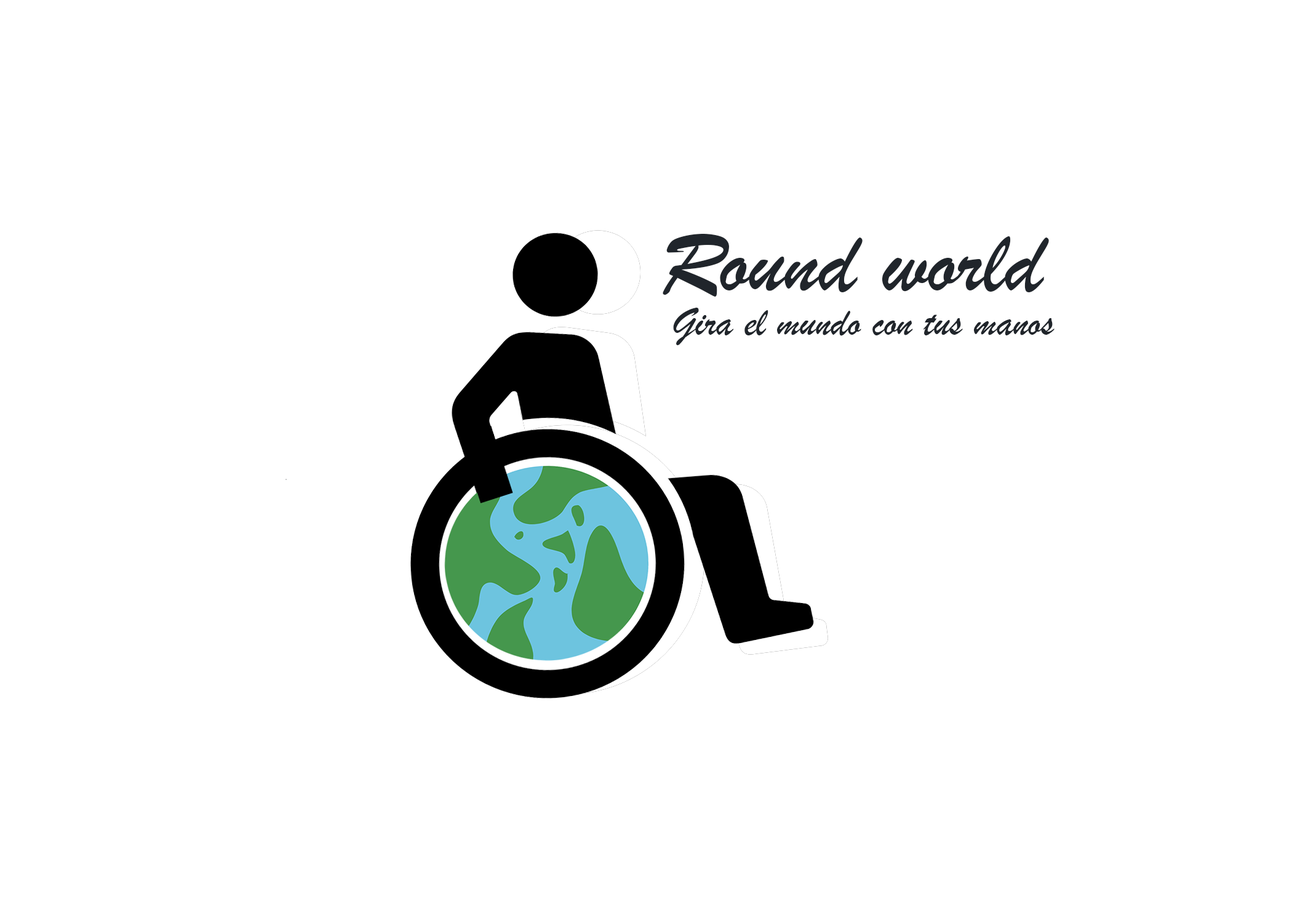
<style>
.page{position:relative;width:1292px;height:923px;background:#ffffff}
.page>*{position:absolute;margin:0}
.t1{font:92.3px "BrushScriptMT";color:#20252b}
.t2{font:41px "BrushScriptMT";color:#20252b}
</style>
<div class="page">
<p class="t1" style="left:663px;top:234px;width:386px;height:63px">Round world</p>
<p class="t2" style="left:673px;top:308px;width:382px;height:37px">Gira el mundo con tus manos</p>
</div>
